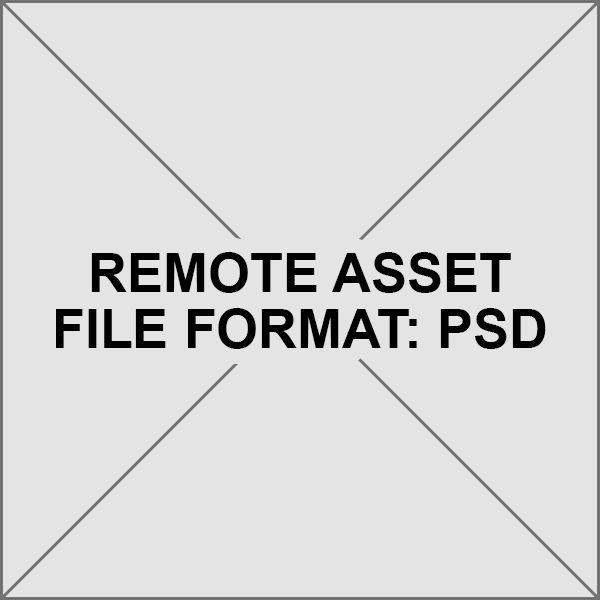
<style>
.page{position:relative;width:600px;height:600px;background:#e4e4e4}
.page>*{position:absolute;margin:0}
.t1{font:54px/28px "Arial-BoldMT";color:#000000;text-transform:uppercase}
</style>
<div class="page">
<p class="t1" style="left:56px;top:252px;width:490px;height:97px;text-align:center">Remote Asset<br><br>FIle Format: PSD</p>
</div>
